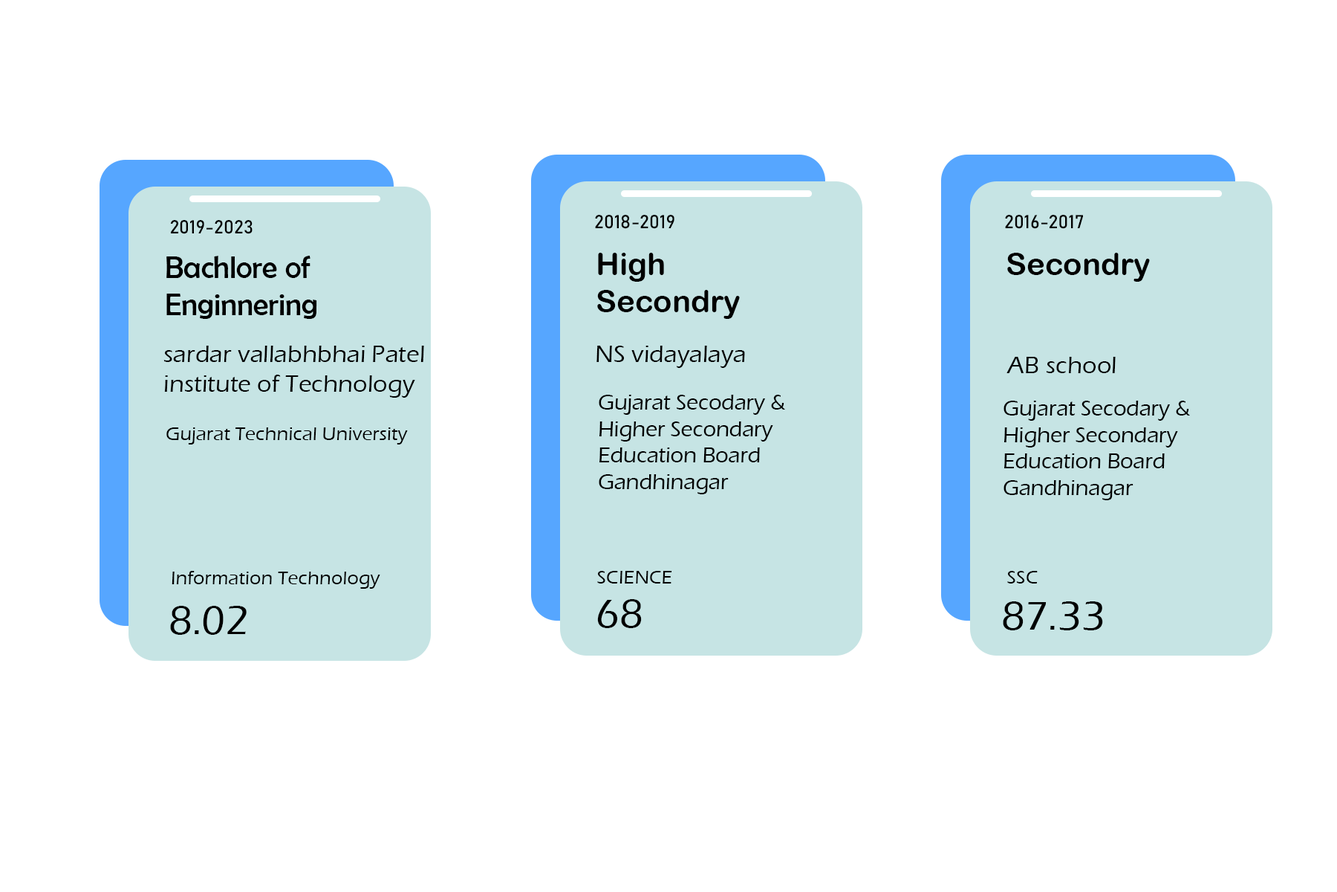
<style>
.page{position:relative;width:1337px;height:892px;background:#ffffff}
.page>*{position:absolute;margin:0}
.t1{font:18.6px "Bahnschrift";color:#000000}
.t2{font:31px "BerlinSansFB-Reg";color:#000000}
.t3{font:31px "ArialRoundedMTBold";color:#000000}
.t4{font:24.8px "ErasITC-Medium";color:#000000}
.t5{font:22px "ErasITC-Medium";color:#000000}
.t6{font:19.6px "ErasITC-Medium";color:#000000}
.t7{font:41.4px "ErasITC-Medium";color:#000000}
</style>
<div class="page">
<p class="t1" style="left:170px;top:220px;width:83px;height:14px">2019-2023</p>
<p class="t1" style="left:595px;top:215px;width:80px;height:14px">2018-2019</p>
<p class="t1" style="left:1005px;top:215px;width:78px;height:14px">2016-2017</p>
<p class="t2" style="left:166px;top:256px;width:151px;height:63px">Bachlore of<br>Enginnering</p>
<p class="t3" style="left:597px;top:253px;width:143px;height:66px">High<br>Secondry</p>
<p class="t3" style="left:1008px;top:253px;width:142px;height:29px">Secondry</p>
<p class="t4" style="left:163px;top:345px;width:261px;height:53px">sardar vallabhbhai Patel <br>institute of Technology</p>
<p class="t4" style="left:597px;top:345px;width:148px;height:23px">NS vidayalaya</p>
<p class="t4" style="left:1007px;top:357px;width:109px;height:16px">AB school</p>
<p class="t5" style="left:599px;top:395px;width:186px;height:99px">Gujarat Secodary &amp;<br>Higher Secondary<br>Education Board<br>Gandhinagar</p>
<p class="t5" style="left:1004px;top:400px;width:186px;height:100px">Gujarat Secodary &amp;<br>Higher Secondary<br>Education Board<br>Gandhinagar</p>
<p class="t6" style="left:166px;top:427px;width:242px;height:17px">Gujarat Technical University</p>
<p class="t6" style="left:172px;top:571px;width:208px;height:17px">Information Technology</p>
<p class="t6" style="left:597px;top:571px;width:75px;height:12px">SCIENCE</p>
<p class="t6" style="left:1008px;top:571px;width:30px;height:12px">SSC</p>
<p class="t7" style="left:170px;top:606px;width:77px;height:29px">8.02</p>
<p class="t7" style="left:597px;top:599px;width:45px;height:29px">68</p>
<p class="t7" style="left:1003px;top:601px;width:100px;height:29px">87.33</p>
</div>
